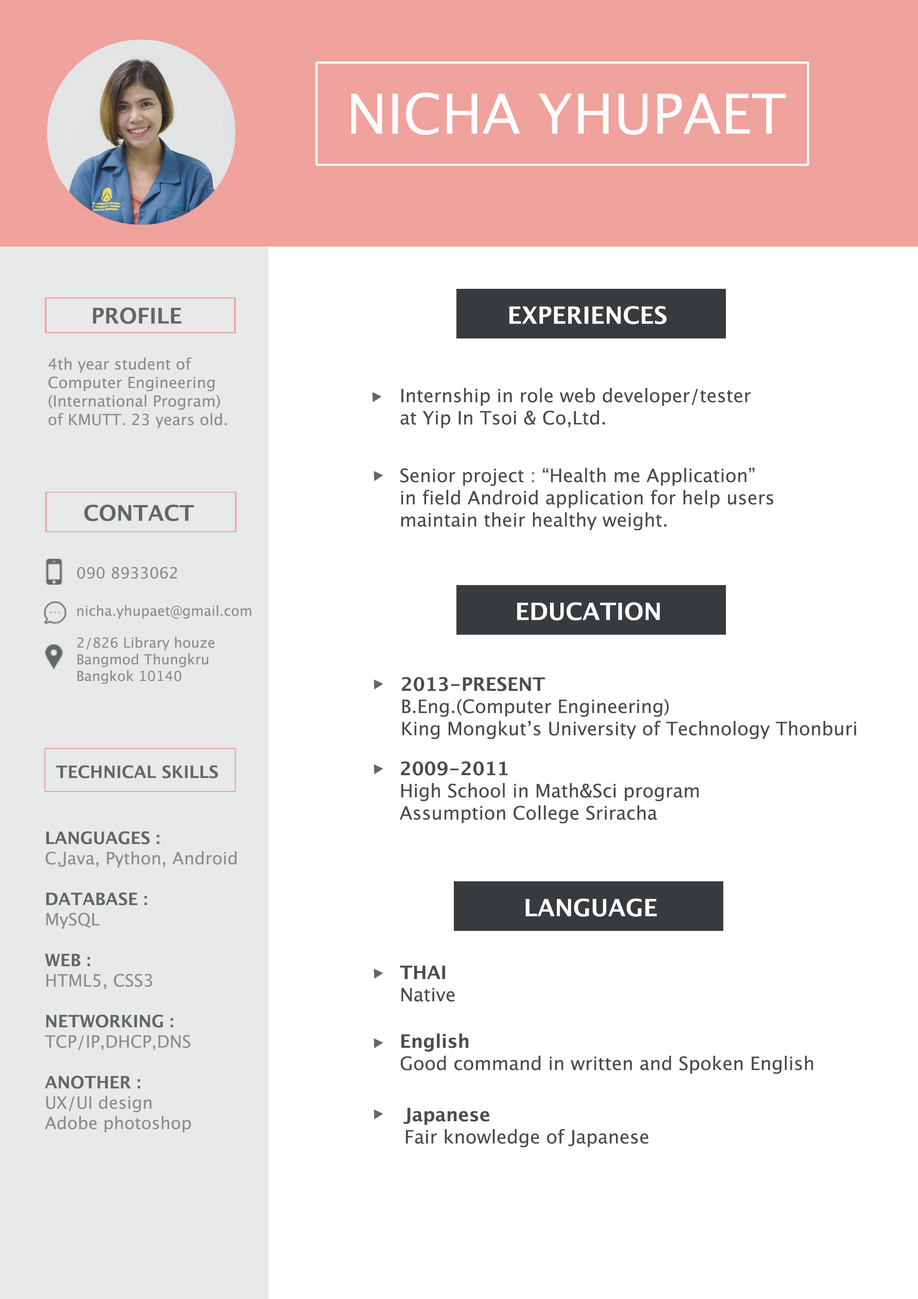
<style>
.page{position:relative;width:918px;height:1299px;background:#ffffff}
.page>*{position:absolute;margin:0}
.t1{font:55.5px "LucidaGrande";color:#ffffff}
.t2{font:23.7px "LucidaGrande-Bold";color:#ffffff}
.t3{font:21.6px "LucidaGrande-Bold";color:#636768}
.t4{font:15.4px "LucidaGrande";color:#8c8e8e}
.t5{font:18.5px "LucidaGrande";color:#4a4d4f}
.t6{font:4.4px "LucidaGrande";color:#4a4d4f}
.t7{font:13.9px "LucidaGrande";color:#8c8e8e}
.t8{font:18.5px "LucidaGrande-Bold";color:#4a4d4f}
.t9{font:4.4px "LucidaGrande-Bold";color:#4a4d4f}
.t10{font:17px "LucidaGrande-Bold";color:#636768}
.t11{font:17px "LucidaGrande";color:#8c8e8e}
</style>
<div class="page">
<p class="t1" style="left:351px;top:93px;width:435px;height:42px">NICHA YHUPAET</p>
<p class="t2" style="left:509px;top:306px;width:158px;height:18px">EXPERIENCES</p>
<p class="t3" style="left:93px;top:307px;width:88px;height:17px">PROFILE</p>
<p class="t4" style="left:48px;top:357px;width:179px;height:71px">4th year student of <br>Computer Engineering<br>(International Program) <br>of KMUTT. 23 years old.</p>
<p class="t5" style="left:401px;top:388px;width:350px;height:40px">Internship in role web developer/tester<br>at Yip In Tsoi &amp; Co,Ltd.</p>
<p class="t6" style="left:400px;top:468px;width:373px;height:63px">Senior project : “Health me Application” <br>in field Android application for help users <br>maintain their healthy weight.</p>
<p class="t3" style="left:84px;top:504px;width:110px;height:17px">CONTACT</p>
<p class="t4" style="left:77px;top:567px;width:100px;height:12px">090 8933062</p>
<p class="t7" style="left:77px;top:605px;width:174px;height:14px">nicha.yhupaet@gmail.com</p>
<p class="t2" style="left:517px;top:602px;width:143px;height:18px">EDUCATION</p>
<p class="t7" style="left:77px;top:637px;width:137px;height:47px">2/826 Library houze<br>Bangmod Thungkru<br>Bangkok 10140</p>
<p class="t5" style="left:402px;top:677px;width:454px;height:62px"><span class="t8">2013-PRESENT</span>   <br>B.Eng.(Computer Engineering)<br>King Mongkut’s University of Technology Thonburi</p>
<p class="t6" style="left:399px;top:761px;width:300px;height:62px"><span class="t9">2009-2011</span>          <br>High School in Math&amp;Sci program<br>Assumption College Sriracha</p>
<p class="t10" style="left:56px;top:765px;width:162px;height:13px">TECHNICAL SKILLS</p>
<p class="t11" style="left:45px;top:831px;width:192px;height:301px"><span class="t10">LANGUAGES : <br></span>C,Java, Python, Android<br><br><span class="t10">DATABASE : <br></span>MySQL<br><br><span class="t10">WEB : <br></span>HTML5, CSS3 <br><br><span class="t10">NETWORKING :<br></span>TCP/IP,DHCP,DNS<br><br><span class="t10">ANOTHER :<br></span>UX/UI design<br>Adobe photoshop</p>
<p class="t2" style="left:526px;top:898px;width:131px;height:19px">LANGUAGE</p>
<p class="t6" style="left:400px;top:965px;width:55px;height:36px"><span class="t9">THAI<br></span>Native</p>
<p class="t5" style="left:401px;top:1033px;width:412px;height:41px"><span class="t8">English <br></span>Good command in written and Spoken English</p>
<p class="t6" style="left:404px;top:1107px;width:245px;height:40px"><span class="t9">Japanese<br></span>Fair knowledge of Japanese</p>
</div>
